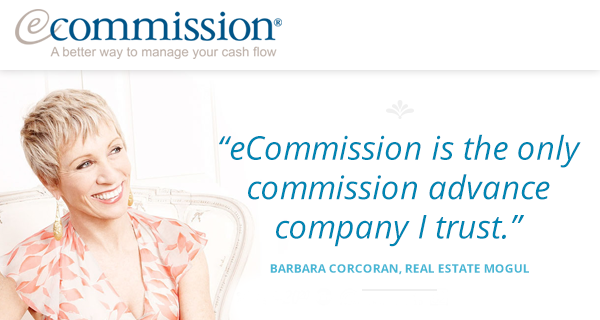
<style>
.page{position:relative;width:600px;height:320px;background:#ffffff}
.page>*{position:absolute;margin:0}
.t1{font:32.9px "OpenSans-Italic";color:#0085b2}
.t2{font:12px "OpenSans-Bold";color:#46b7d5;text-transform:uppercase}
</style>
<div class="page">
<p class="t1" style="left:219px;top:134px;width:362px;height:113px;text-align:center">“eCommission is the only<br>commission advance<br>company I trust.”</p>
<p class="t2" style="left:270px;top:264px;width:259px;height:11px">Barbara Corcoran, Real Estate Mogul</p>
</div>
